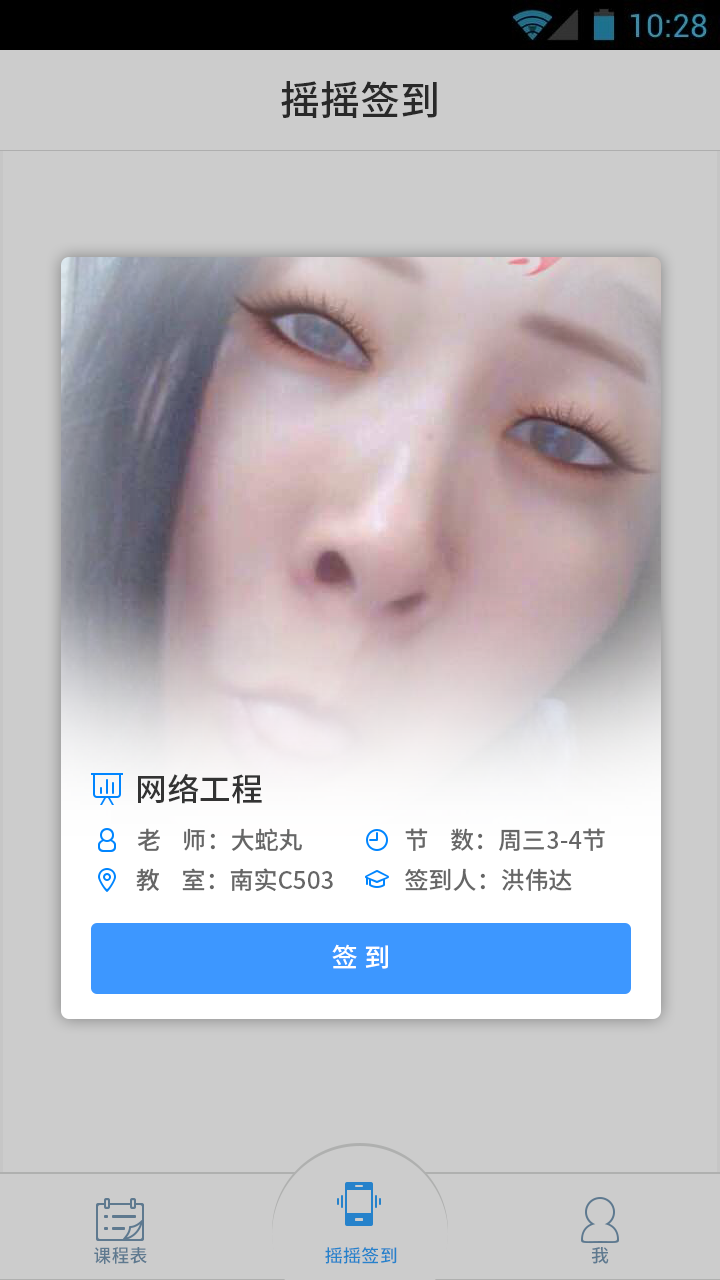
<style>
.page{position:relative;width:720px;height:1280px;background:#cccccc}
.page>*{position:absolute;margin:0}
.t1{font:40px "NotoSansHans-Medium";color:#333333}
.t2{font:32px "NotoSansHans-Medium";color:#333333}
.t3{font:24px "NotoSansHans-Medium";color:#666666}
.t4{font:26px "NotoSansHans-Medium";color:#ffffff}
.t5{font:18.2px "NotoSansHans-Medium";letter-spacing:0.02em;color:#5e798f}
.t6{font:18.1px "NotoSansHans-Medium";letter-spacing:0.02em;color:#2682cb}
.t7{font:18px "NotoSansHans-Medium";letter-spacing:0.02em;color:#5e798f}
</style>
<div class="page">
<p class="t1" style="left:281px;top:81px;width:156px;height:37px">摇摇签到</p>
<p class="t2" style="left:138px;top:773px;width:124px;height:31px">网络工程</p>
<p class="t3" style="left:137px;top:828px;width:165px;height:23px">老    师：大蛇丸</p>
<p class="t3" style="left:405px;top:828px;width:200px;height:23px">节    数：周三3-4节</p>
<p class="t3" style="left:136px;top:868px;width:197px;height:24px">教    室：南实C503</p>
<p class="t3" style="left:405px;top:868px;width:167px;height:23px">签到人：洪伟达</p>
<p class="t4" style="left:332px;top:944px;width:56px;height:25px">签 到</p>
<p class="t5" style="left:94px;top:1247px;width:53px;height:17px">课程表</p>
<p class="t6" style="left:325px;top:1247px;width:72px;height:17px">摇摇签到</p>
<p class="t7" style="left:591px;top:1247px;width:18px;height:17px">我</p>
</div>
